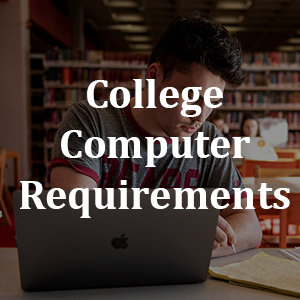
<style>
.page{position:relative;width:300px;height:300px}
.page>*{position:absolute;margin:0}
.t1{font:42px "Cambria-Bold";color:#ffffff}
</style>
<div class="page">
<p class="t1" style="left:20px;top:79px;width:270px;height:139px;text-align:center">College<br>Computer<br>Requirements</p>
</div>
